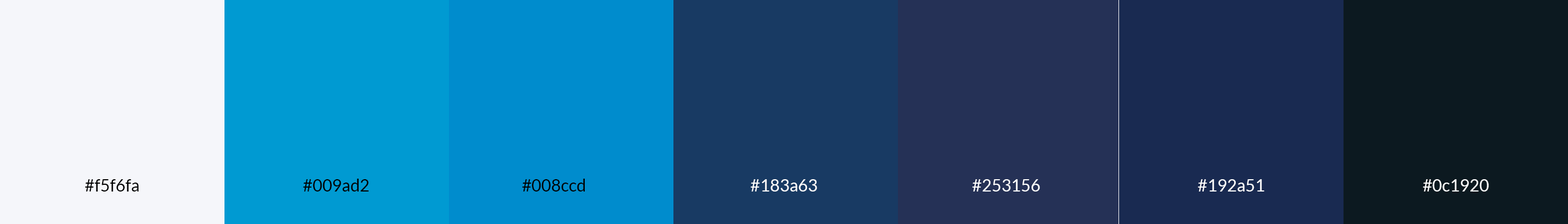
<style>
.page{position:relative;width:1568px;height:224px}
.page>*{position:absolute;margin:0}
.t1{font:16.8px "Lato-Regular";color:#000000}
.t2{font:16.8px "Lato-Regular";color:#ffffff}
</style>
<div class="page">
<p class="t1" style="left:85px;top:180px;width:54px;height:12px">#f5f6fa</p>
<p class="t1" style="left:303px;top:179px;width:66px;height:13px">#009ad2</p>
<p class="t1" style="left:522px;top:179px;width:63px;height:13px">#008ccd</p>
<p class="t2" style="left:750px;top:180px;width:67px;height:12px">#183a63</p>
<p class="t2" style="left:972px;top:180px;width:68px;height:12px">#253156</p>
<p class="t2" style="left:1198px;top:180px;width:66px;height:12px">#192a51</p>
<p class="t2" style="left:1423px;top:180px;width:66px;height:12px">#0c1920</p>
</div>
